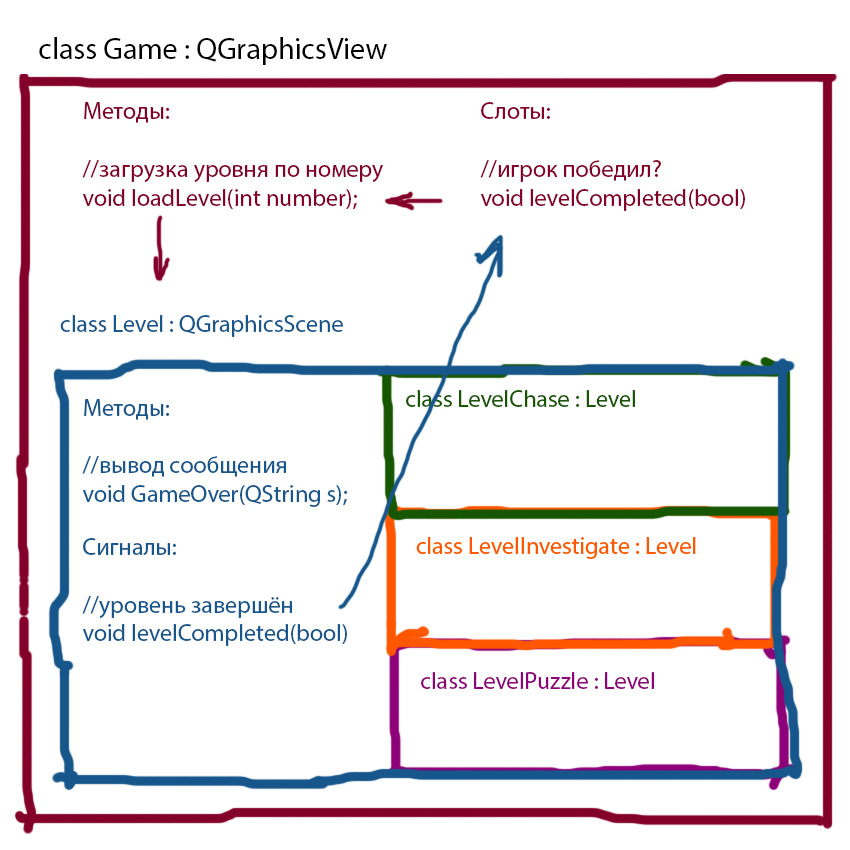
<style>
.page{position:relative;width:850px;height:850px;background:#ffffff}
.page>*{position:absolute;margin:0}
.t1{font:30px "MyriadPro-Regular";color:#000000}
.t2{font:24px "MyriadPro-Regular";color:#83002b}
.t3{font:24px "MyriadPro-Regular";color:#16568a}
.t4{font:24px "MyriadPro-Regular";color:#165600}
.t5{font:24px "MyriadPro-Regular";color:#8d0078}
</style>
<div class="page">
<p class="t1" style="left:39px;top:37px;width:348px;height:28px">class Game : QGraphicsView</p>
<p class="t2" style="left:82px;top:102px;width:301px;height:108px">Методы:<br><br>//загрузка уровня по номеру<br>void loadLevel(int number);</p>
<p class="t2" style="left:480px;top:102px;width:265px;height:109px">Слоты:<br><br>//игрок победил?<br>void levelCompleted(bool)</p>
<p class="t3" style="left:60px;top:315px;width:283px;height:22px">class Level : QGraphicsScene</p>
<p class="t4" style="left:406px;top:390px;width:229px;height:17px">class LevelChase : Level</p>
<p class="t3" style="left:82px;top:399px;width:266px;height:108px">Методы:<br><br>//вывод сообщения<br>void GameOver(QString s);</p>
<p class="t3" style="left:82px;top:538px;width:265px;height:108px">Сигналы:<br><br>//уровень завершён<br>void levelCompleted(bool)</p>
<p class="t5" style="left:421px;top:672px;width:233px;height:17px">class LevelPuzzle : Level</p>
</div>
